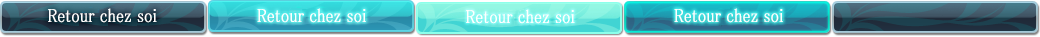
<style>
.page{position:relative;width:1040px;height:37px}
.page>*{position:absolute;margin:0}
.t1{font:19px "MS-PMincho";color:#ffffff;font-weight:bold;scale:0.84 1}
</style>
<div class="page">
<p class="t1" style="left:48px;top:8px;width:109px;height:15px">Retour chez soi</p>
<p class="t1" style="left:257px;top:8px;width:109px;height:15px">Retour chez soi</p>
<p class="t1" style="left:466px;top:9px;width:109px;height:15px">Retour chez soi</p>
<p class="t1" style="left:674px;top:8px;width:109px;height:15px">Retour chez soi</p>
</div>
